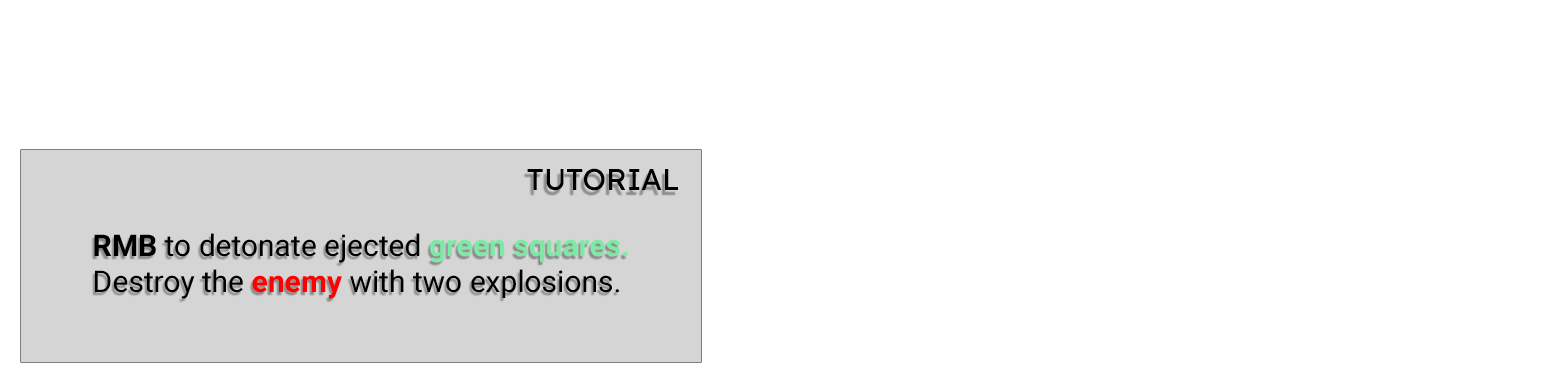
<style>
.page{position:relative;width:1564px;height:373px;background:#ffffff}
.page>*{position:absolute;margin:0}
.t1{font:30px "LexendDeca-Regular";color:#000000}
.t2{font:30px "Roboto-Regular";color:#000000}
.t3{font:30px "Roboto-Bold";color:#000000}
.t4{font:30px "Roboto-Bold";color:#7de9a5}
.t5{font:30px "Roboto-Bold";color:#ff0000}
</style>
<div class="page">
<p class="t1" style="left:527px;top:168px;width:151px;height:23px">TUTORIAL</p>
<p class="t2" style="left:94px;top:233px;width:534px;height:66px"><span class="t3">RMB</span> to detonate ejected <span class="t4">green squares.<br></span>Destroy the <span class="t5">enemy </span>with two explosions.</p>
</div>
